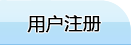
<style>
.page{position:relative;width:131px;height:45px}
.page>*{position:absolute;margin:0}
.t1{font:18px "MicrosoftYaHei";color:#000000;font-weight:bold}
</style>
<div class="page">
<p class="t1" style="left:27px;top:15px;width:74px;height:18px">用户注册</p>
</div>
